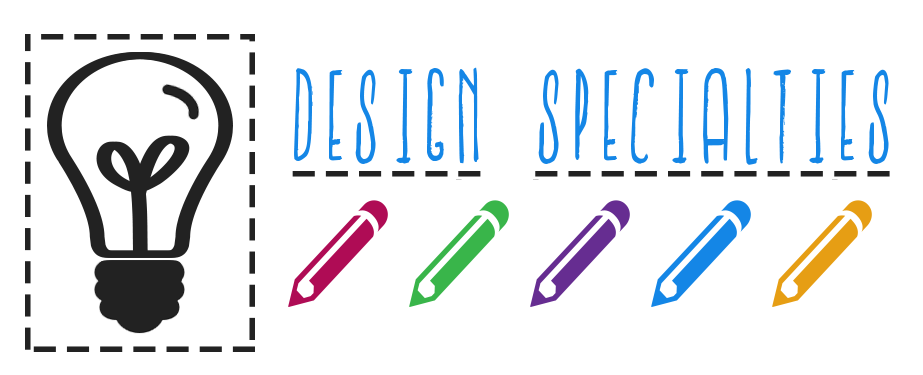
<style>
.page{position:relative;width:923px;height:375px;background:#ffffff}
.page>*{position:absolute;margin:0}
.t1{font:100px "IronFurnaces-Regular";color:#1486e6}
.t2{font:161.4px "ModernPictograms";color:#af0c55;scale:0.93 1}
.t3{font:161.4px "ModernPictograms";color:#39b54a;scale:0.93 1}
.t4{font:161.4px "ModernPictograms";color:#662d91;scale:0.93 1}
.t5{font:161.4px "ModernPictograms";color:#1486e6;scale:0.93 1}
.t6{font:161.4px "ModernPictograms";color:#e69e14;scale:0.93 1}
</style>
<div class="page">
<p class="t1" style="left:294px;top:67px;width:595px;height:98px">Design Specialties</p>
<p class="t2" style="left:288px;top:200px;width:584px;height:107px">r<span class="t3">r</span><span class="t4">r</span><span class="t5">r</span><span class="t6">r</span></p>
</div>
